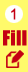
<style>
.page{position:relative;width:28px;height:72px;background:#fffa6a}
.page>*{position:absolute;margin:0}
.t1{font:15px "ArialMT";color:#c40013}
.t2{font:19px "Impact";letter-spacing:0.025em;color:#c40013}
</style>
<div class="page">
<p class="t1" style="left:11px;top:8px;width:5px;height:12px">1</p>
<p class="t1" style="left:11px;top:8px;width:5px;height:12px">1</p>
<p class="t2" style="left:3px;top:30px;width:24px;height:16px">Fill</p>
<p class="t2" style="left:3px;top:30px;width:24px;height:16px">Fill</p>
</div>
